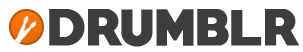
<style>
.page{position:relative;width:303px;height:52px;background:#ffffff}
.page>*{position:absolute;margin:0}
.t1{font:46.1px "PRIMETIME-Regular";color:#3d3d3d;font-weight:bold}
</style>
<div class="page">
<p class="t1" style="left:49px;top:9px;width:250px;height:38px">DRUMBLR</p>
</div>
